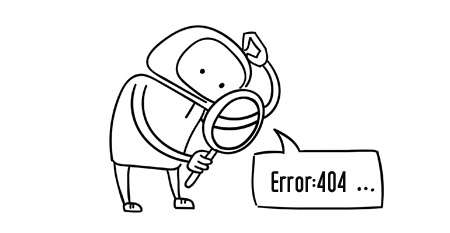
<style>
.page{position:relative;width:450px;height:233px;background:#ffffff}
.page>*{position:absolute;margin:0}
.t1{font:25.9px "UTM-Pacific-Standard";letter-spacing:0.01em;color:#0a0a0a}
</style>
<div class="page">
<p class="t1" style="left:271px;top:171px;width:75px;height:22px">Error:404</p>
</div>
